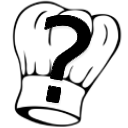
<style>
.page{position:relative;width:128px;height:128px;background:#ffffff}
.page>*{position:absolute;margin:0}
.t1{font:117.5px "DejaVuSans";color:#000000}
</style>
<div class="page">
<p class="t1" style="left:45px;top:15px;width:46px;height:88px;rotate:10deg">?</p>
</div>
